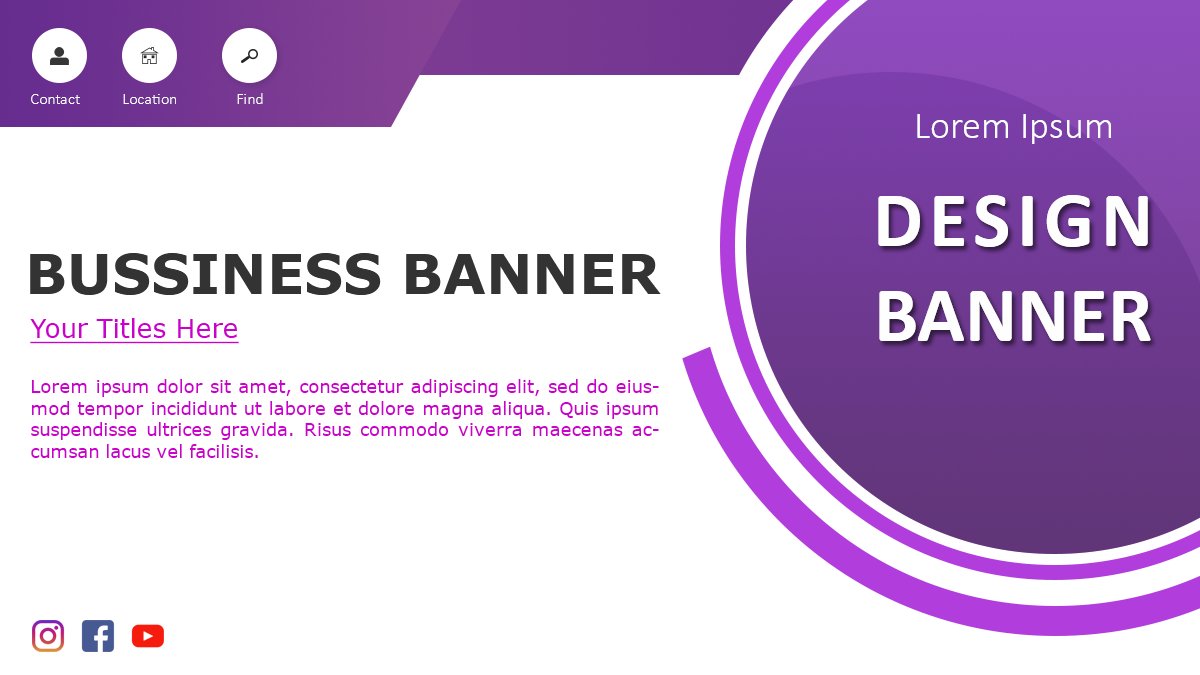
<style>
.page{position:relative;width:1200px;height:675px;background:#ffffff}
.page>*{position:absolute;margin:0}
.t1{font:16px "Calibri-Light";color:#ffffff}
.t2{font:38px "Calibri-Light";color:#fefefe}
.t3{font:79px "Calibri-Bold";letter-spacing:0.08em;color:#fefefe}
.t4{font:79px "Calibri-Bold";color:#fefefe}
.t5{font:55px "Verdana-Bold";color:#333333}
.t6{font:26px "Verdana";color:#cc00cc;text-decoration:underline}
.t7{font:18px "Verdana";color:#cc00cc}
</style>
<div class="page">
<p class="t1" style="left:31px;top:94px;width:49px;height:10px">Contact</p>
<p class="t1" style="left:123px;top:94px;width:53px;height:10px">Location</p>
<p class="t1" style="left:237px;top:93px;width:26px;height:11px">Find</p>
<p class="t2" style="left:917px;top:114px;width:194px;height:30px">Lorem Ipsum</p>
<p class="t3" style="left:878px;top:195px;width:273px;height:146px;text-align:center">DESIGN<br><span class="t4">BANNER</span></p>
<p class="t5" style="left:30px;top:253px;width:631px;height:42px">BUSSINESS BANNER</p>
<p class="t6" style="left:30px;top:318px;width:209px;height:26px">Your Titles Here</p>
<p class="t7" style="left:31px;top:379px;width:628px;height:79px;text-align:justify">Lorem ipsum dolor sit amet, consectetur adipiscing elit, sed do eiusmod tempor incididunt ut labore et dolore magna aliqua. Quis ipsum suspendisse ultrices gravida. Risus commodo viverra maecenas accumsan lacus vel facilisis.</p>
</div>
